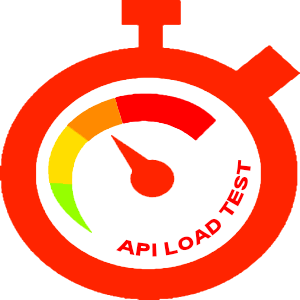
<style>
.page{position:relative;width:300px;height:300px;background:#ffffff}
.page>*{position:absolute;margin:0}
.t1{font:18px "Arial-BoldMT";color:#fe0101}
</style>
<div class="page">
<p class="t1" style="left:116px;top:160px;width:135px;height:97px;rotate:-34deg">API LOAD TEST</p>
</div>
